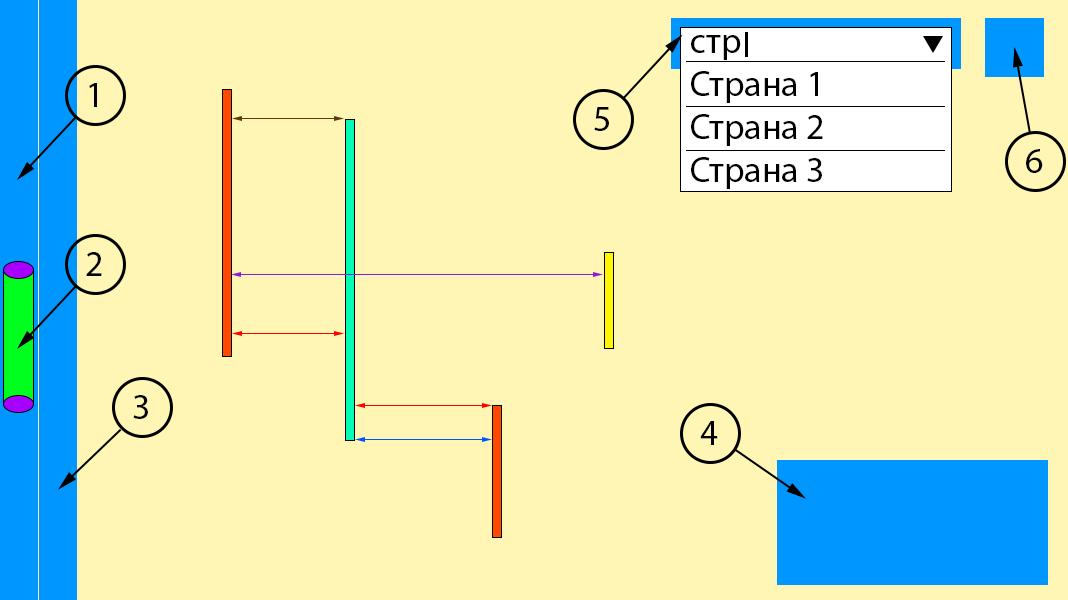
<style>
.page{position:relative;width:1068px;height:600px;background:#fff5b4}
.page>*{position:absolute;margin:0}
.t1{font:36px "MyriadPro-Regular";color:#000000}
</style>
<div class="page">
<p class="t1" style="left:691px;top:35px;width:132px;height:154px">стр<br>Страна 1<br>Страна 2<br>Страна 3</p>
<p class="t1" style="left:89px;top:83px;width:8px;height:24px">1</p>
<p class="t1" style="left:594px;top:107px;width:15px;height:24px">5</p>
<p class="t1" style="left:1026px;top:149px;width:17px;height:24px">6</p>
<p class="t1" style="left:86px;top:252px;width:16px;height:24px">2</p>
<p class="t1" style="left:133px;top:395px;width:15px;height:24px">3</p>
<p class="t1" style="left:700px;top:421px;width:18px;height:24px">4</p>
</div>
